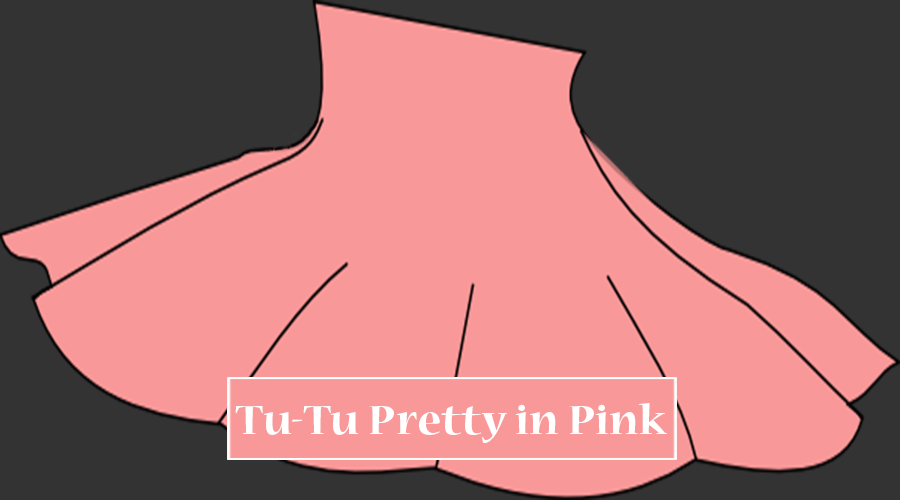
<style>
.page{position:relative;width:900px;height:500px;background:#f99898}
.page>*{position:absolute;margin:0}
.t1{font:45.7px "NuevaStd-Bold";color:#ffffff;scale:1.06 1}
</style>
<div class="page">
<p class="t1" style="left:235px;top:403px;width:432px;height:40px">Tu-Tu Pretty in Pink</p>
</div>
